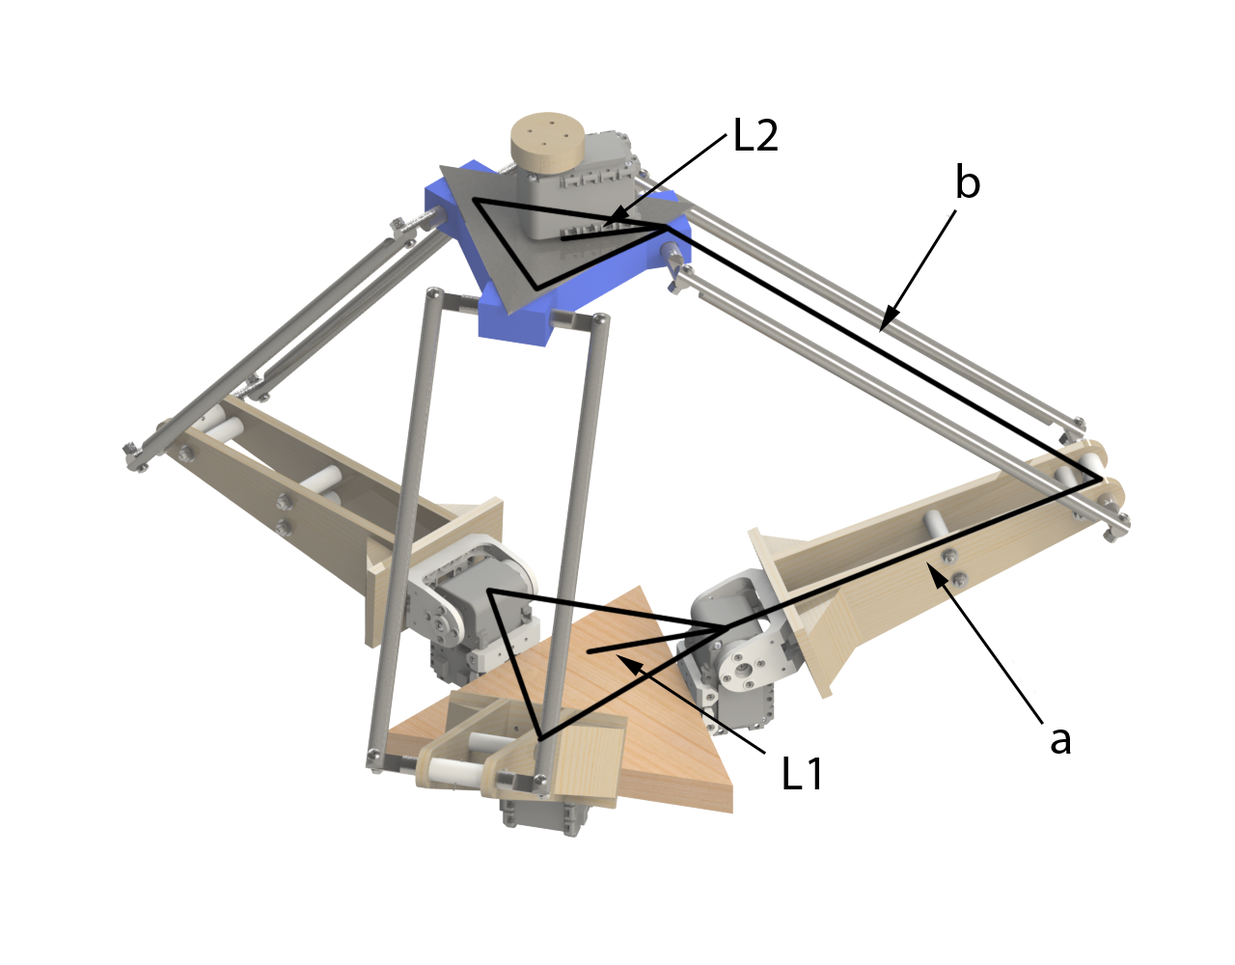
<style>
.page{position:relative;width:1235px;height:965px;background:#ffffff}
.page>*{position:absolute;margin:0}
.t1{font:11.6px "MyriadPro-Regular";color:#000000}
</style>
<div class="page">
<p class="t1" style="left:735px;top:118px;width:43px;height:33px">L2</p>
<p class="t1" style="left:957px;top:163px;width:24px;height:35px">b</p>
<p class="t1" style="left:1051px;top:730px;width:20px;height:24px">a</p>
<p class="t1" style="left:784px;top:757px;width:35px;height:33px">L1</p>
</div>
